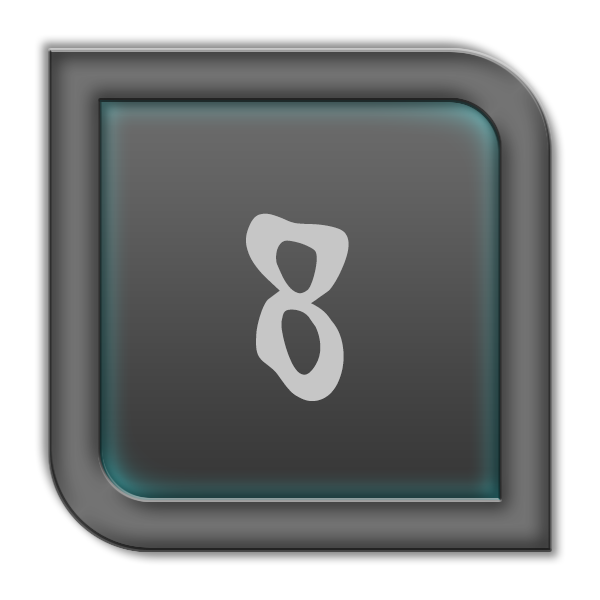
<style>
.page{position:relative;width:600px;height:600px;background:#ffffff}
.page>*{position:absolute;margin:0}
.t1{font:300px "WILD2GhixmNC";color:#c6c6c6;scale:0.83 1}
</style>
<div class="page">
<p class="t1" style="left:246px;top:213px;width:103px;height:188px">8</p>
</div>
